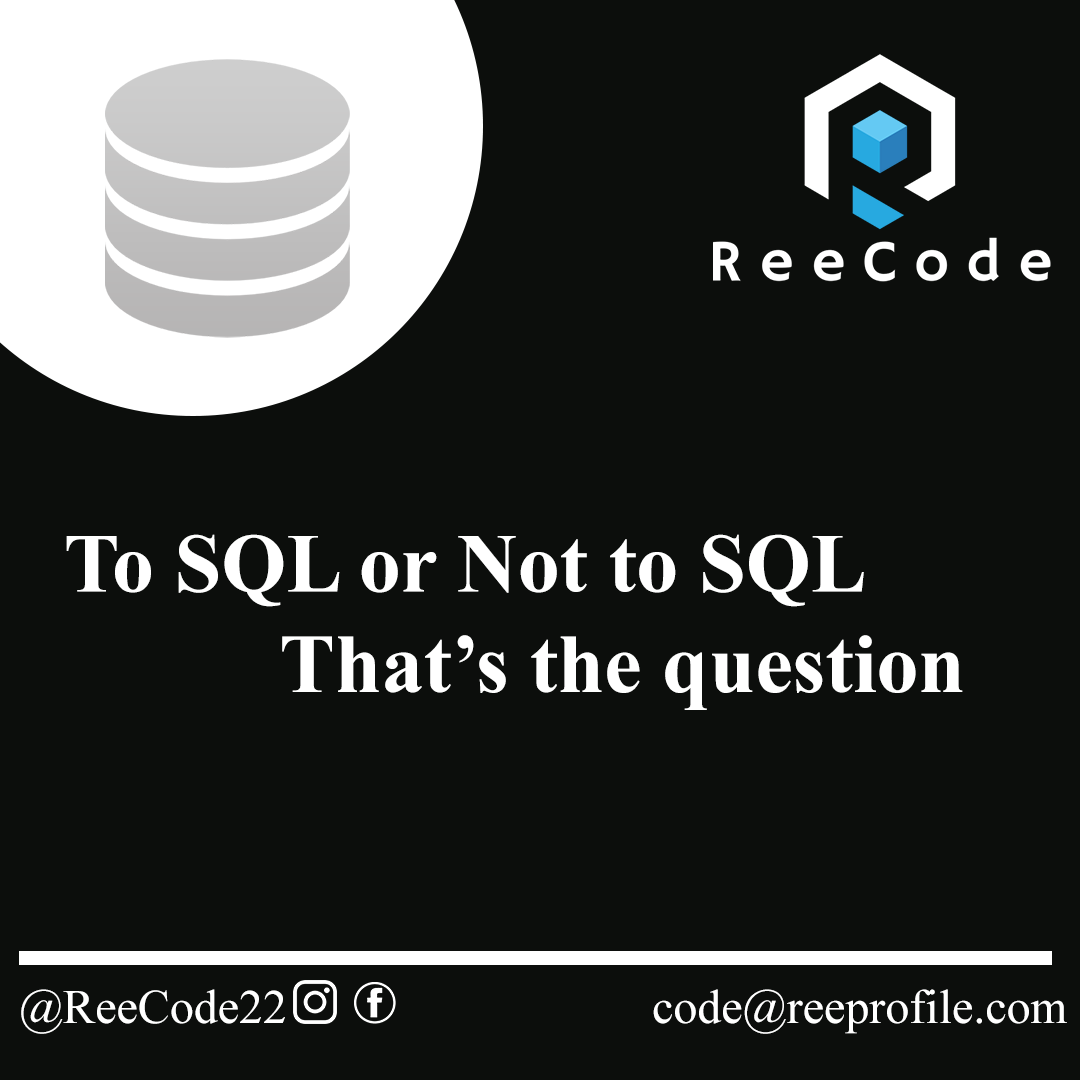
<style>
.page{position:relative;width:1080px;height:1080px;background:#0c0e0c}
.page>*{position:absolute;margin:0}
.t1{font:83.8px "TimesNewRomanPS-BoldMT";color:#ffffff}
.t2{font:48px "TimesNewRomanPSMT";color:#ffffff}
</style>
<div class="page">
<p class="t1" style="left:66px;top:534px;width:897px;height:176px">To SQL or Not to SQL<br>     That’s the question</p>
<p class="t2" style="left:21px;top:989px;width:264px;height:45px">@ReeCode22</p>
<p class="t2" style="left:653px;top:989px;width:414px;height:45px">code@reeprofile.com</p>
</div>
